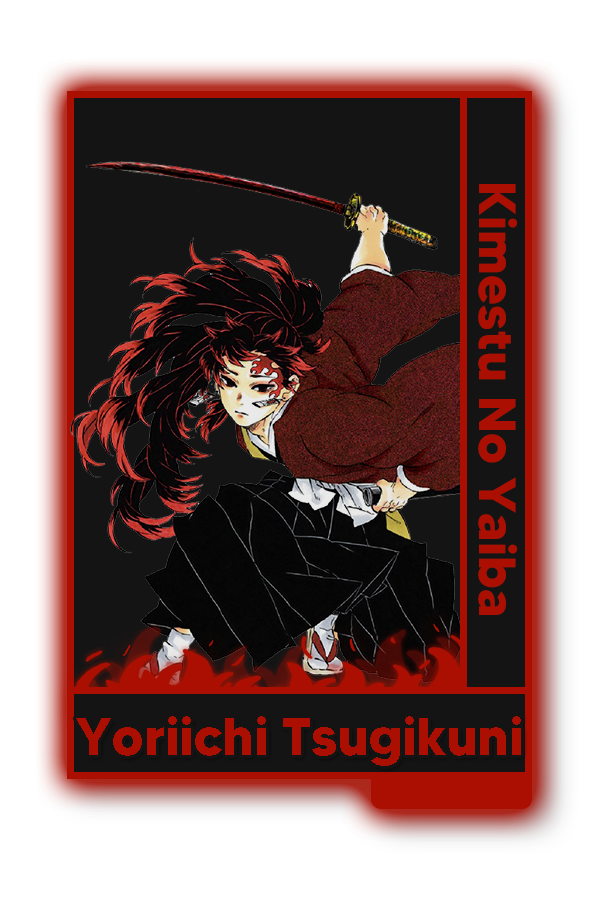
<style>
.page{position:relative;width:600px;height:900px;background:#141414}
.page>*{position:absolute;margin:0}
.t1{font:52px "MADETOMMY-Bold";color:#ab0f01}
.t2{font:52.9px "MADETOMMY-Bold";color:#ab0f01}
</style>
<div class="page">
<p class="t1" style="left:478px;top:184px;width:40px;height:431px;rotate:90deg">Kimestu No Yaiba</p>
<p class="t2" style="left:76px;top:716px;width:445px;height:50px">Yoriichi Tsugikuni</p>
</div>
